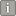
<style>
.page{position:relative;width:16px;height:16px;background:#a7a6a0}
.page>*{position:absolute;margin:0}
.t1{font:13.4px "CenturySchoolbook-Bold";letter-spacing:0.05em;color:#ffffff}
</style>
<div class="page">
<p class="t1" style="left:6px;top:2px;width:4px;height:11px">i</p>
</div>
